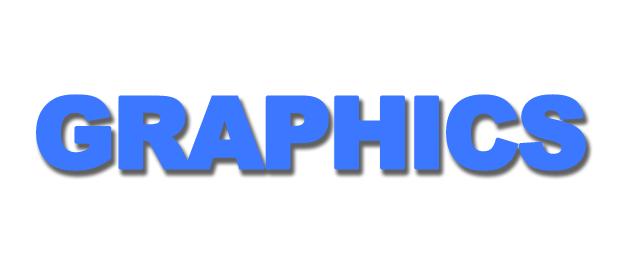
<style>
.page{position:relative;width:623px;height:277px;background:#ffffff}
.page>*{position:absolute;margin:0}
.t1{font:99.1px "Arial-Black";letter-spacing:-0.06em;color:#3c78ff;font-weight:bold}
</style>
<div class="page">
<p class="t1" style="left:36px;top:94px;width:550px;height:77px">GRAPHICS</p>
</div>
